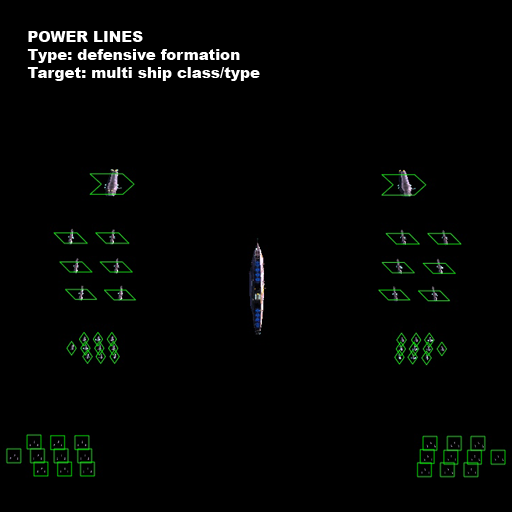
<style>
.page{position:relative;width:512px;height:512px;background:#000000}
.page>*{position:absolute;margin:0}
.t1{font:15px "Arial-Black";color:#ffffff}
</style>
<div class="page">
<p class="t1" style="left:27px;top:31px;width:233px;height:50px">POWER LINES<br>Type: defensive formation<br>Target: multi ship class/type</p>
</div>
